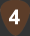
<style>
.page{position:relative;width:30px;height:36px;background:#5c3d29}
.page>*{position:absolute;margin:0}
.t1{font:20.9px "Arial-BoldMT";color:#ffffff}
</style>
<div class="page">
<p class="t1" style="left:9px;top:9px;width:11px;height:16px">4</p>
</div>
